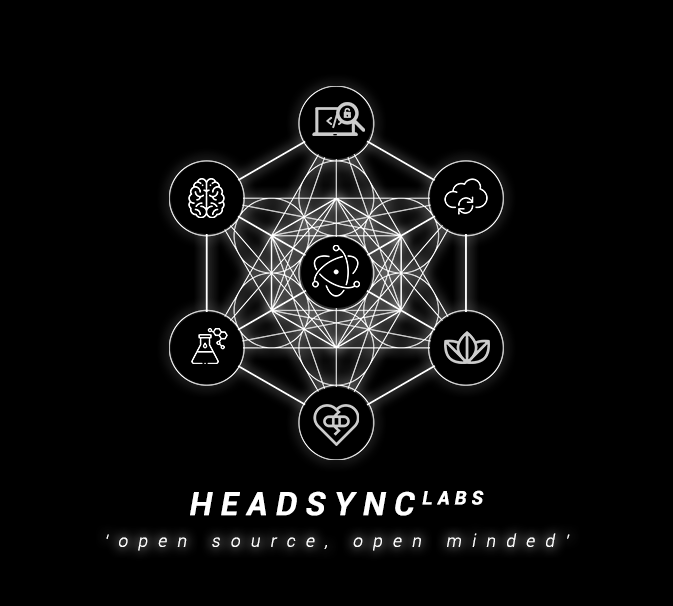
<style>
.page{position:relative;width:673px;height:606px;background:#000000}
.page>*{position:absolute;margin:0}
.t1{font:32.3px "Roboto-Bold";letter-spacing:0.26em;color:#ffffff;text-transform:uppercase;font-style:italic}
.t2{font:17.2px "Roboto-Light";letter-spacing:0.6em;color:#ffffff;font-style:italic}
</style>
<div class="page">
<p class="t1" style="left:190px;top:490px;width:294px;height:26px">headsynclabs</p>
<p class="t2" style="left:106px;top:533px;width:464px;height:18px">‘open source, open minded’</p>
</div>
